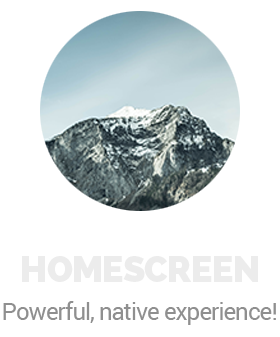
<style>
.page{position:relative;width:280px;height:337px;background:#ffffff}
.page>*{position:absolute;margin:0}
.t1{font:36px "Raleway-Heavy";letter-spacing:-0.02em;color:#ececec}
.t2{font:24px "Roboto-Regular";letter-spacing:-0.04em;color:#8f8f8f}
</style>
<div class="page">
<p class="t1" style="left:22px;top:256px;width:236px;height:26px">HOMESCREEN</p>
<p class="t2" style="left:3px;top:301px;width:273px;height:24px">Powerful, native experience!</p>
</div>
